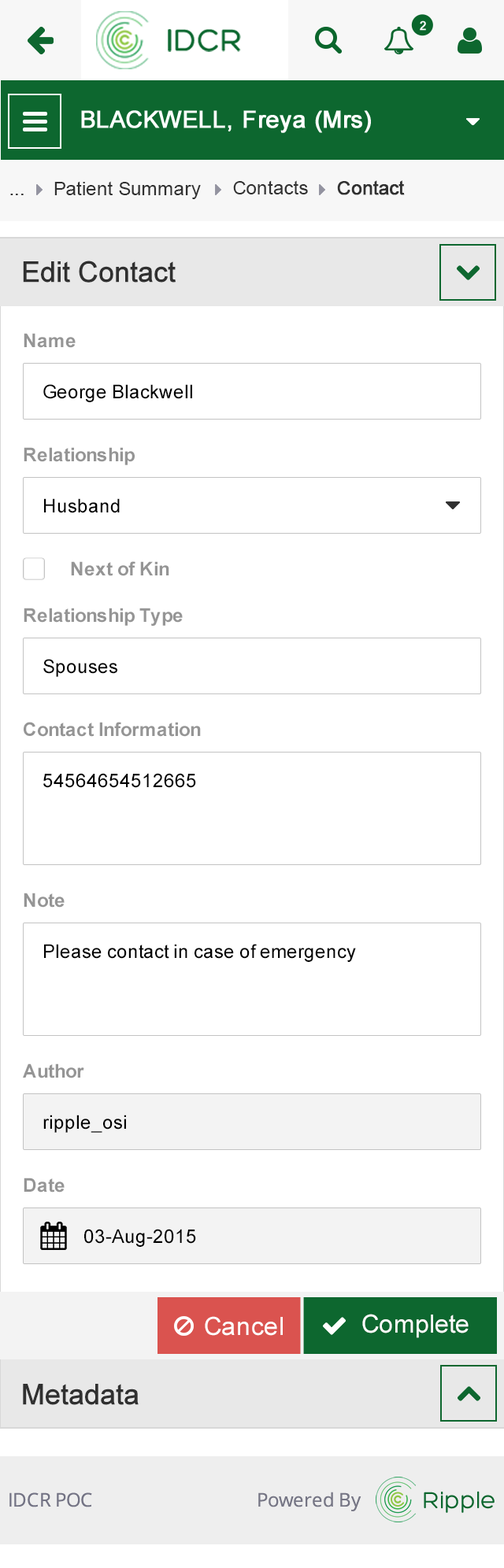
<style>
.page{position:relative;width:504px;height:1568px;background:#ffffff}
.page>*{position:absolute;margin:0}
.t1{font:18.9px "ArialMT";color:#313131}
.t2{font:18.9px "ArialMT";color:#313131;font-weight:bold}
.t3{font:28.3px "ArialMT";color:#303030;font-weight:bold}
.t4{font:18.9px "Arial-BoldMT";color:#959595}
.t5{font:18.9px "ArialMT";color:#000000}
.t6{font:25.2px "ArialMT";color:#ffffff}
</style>
<div class="page">
<p class="t1" style="left:54px;top:181px;width:147px;height:18px">Patient Summary</p>
<p class="t1" style="left:233px;top:180px;width:75px;height:14px">Contacts</p>
<p class="t2" style="left:337px;top:180px;width:68px;height:15px">Contact</p>
<p class="t1" style="left:10px;top:194px;width:14px;height:1px">...</p>
<p class="t3" style="left:23px;top:261px;width:153px;height:22px">Edit Contact</p>
<p class="t4" style="left:24px;top:333px;width:52px;height:15px">Name</p>
<p class="t5" style="left:43px;top:384px;width:149px;height:18px">George Blackwell</p>
<p class="t4" style="left:24px;top:447px;width:111px;height:18px">Relationship</p>
<p class="t5" style="left:44px;top:498px;width:76px;height:15px">Husband</p>
<p class="t4" style="left:71px;top:561px;width:98px;height:15px">Next of Kin</p>
<p class="t4" style="left:24px;top:608px;width:159px;height:18px">Relationship Type</p>
<p class="t5" style="left:43px;top:659px;width:74px;height:18px">Spouses</p>
<p class="t4" style="left:24px;top:722px;width:177px;height:15px">Contact Information</p>
<p class="t5" style="left:43px;top:773px;width:153px;height:15px">54564654512665</p>
<p class="t4" style="left:24px;top:893px;width:41px;height:15px">Note</p>
<p class="t5" style="left:44px;top:944px;width:312px;height:18px">Please contact in case of emergency</p>
<p class="t4" style="left:23px;top:1063px;width:61px;height:15px">Author</p>
<p class="t5" style="left:43px;top:1115px;width:83px;height:18px">ripple_osi</p>
<p class="t4" style="left:24px;top:1178px;width:41px;height:15px">Date</p>
<p class="t5" style="left:84px;top:1229px;width:112px;height:18px">03-Aug-2015</p>
<p class="t6" style="left:362px;top:1314px;width:106px;height:24px">Complete</p>
<p class="t6" style="left:205px;top:1316px;width:78px;height:20px">Cancel</p>
<p class="t3" style="left:23px;top:1384px;width:116px;height:21px">Metadata</p>
</div>
